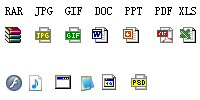
<style>
.page{position:relative;width:200px;height:100px;background:#ffffff}
.page>*{position:absolute;margin:0}
.t1{font:12px "SimSun";color:#000000;text-transform:uppercase}
</style>
<div class="page">
<p class="t1" style="left:5px;top:7px;width:191px;height:9px">rar  jpg  gif  doc  ppt  pdf xls</p>
</div>
